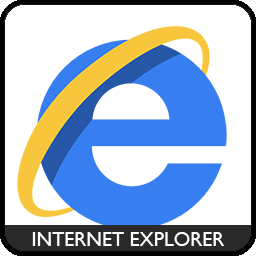
<style>
.page{position:relative;width:256px;height:256px;background:#ffffff}
.page>*{position:absolute;margin:0}
.t1{font:20px "GillSansMT";color:#ffffff}
</style>
<div class="page">
<p class="t1" style="left:32px;top:232px;width:193px;height:14px">INTERNET EXPLORER</p>
</div>
